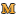
<style>
.page{position:relative;width:16px;height:16px;background:#ffffff}
.page>*{position:absolute;margin:0}
.t1{font:13px "PalatinoLinotype-Bold"}
</style>
<div class="page">
<p class="t1" style="left:2px;top:4px;width:13px;height:9px">M</p>
</div>
